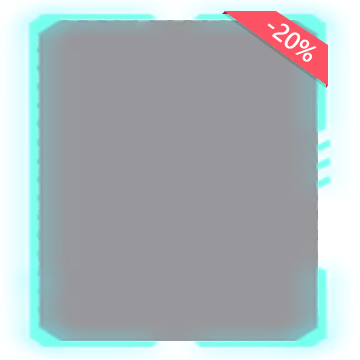
<style>
.page{position:relative;width:360px;height:360px;background:#98989c}
.page>*{position:absolute;margin:0}
.t1{font:24px "SegoeUI";color:#ffffff;font-weight:bold}
</style>
<div class="page">
<p class="t1" style="left:267px;top:23px;width:50px;height:39px;rotate:37deg">-20%</p>
</div>
